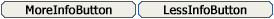
<style>
.page{position:relative;width:274px;height:19px;background:#efefe8}
.page>*{position:absolute;margin:0}
.t1{font:12px "Tahoma";color:#000000;font-weight:bold}
</style>
<div class="page">
<p class="t1" style="left:26px;top:5px;width:86px;height:10px">MoreInfoButton</p>
<p class="t1" style="left:164px;top:5px;width:83px;height:10px">LessInfoButton</p>
</div>
